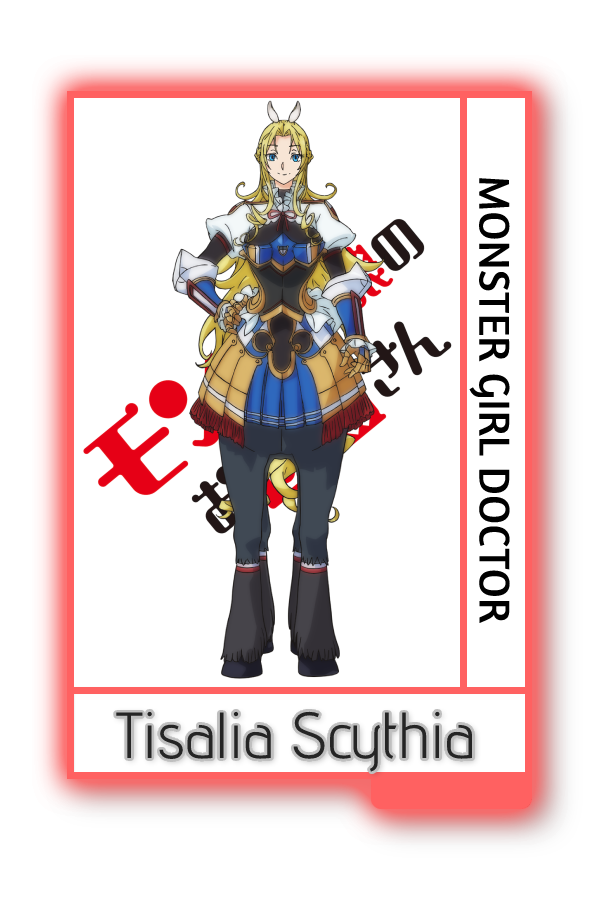
<style>
.page{position:relative;width:600px;height:900px;background:#ffffff}
.page>*{position:absolute;margin:0}
.t1{font:44px "Amaranth-Regular";color:#000000}
.t2{font:65px "AdventPro-Regular";color:#252525}
</style>
<div class="page">
<p class="t1" style="left:469px;top:178px;width:41px;height:446px;rotate:90deg">MONSTER GIRL DOCTOR</p>
<p class="t2" style="left:116px;top:711px;width:357px;height:61px">Tisalia Scythia</p>
</div>
